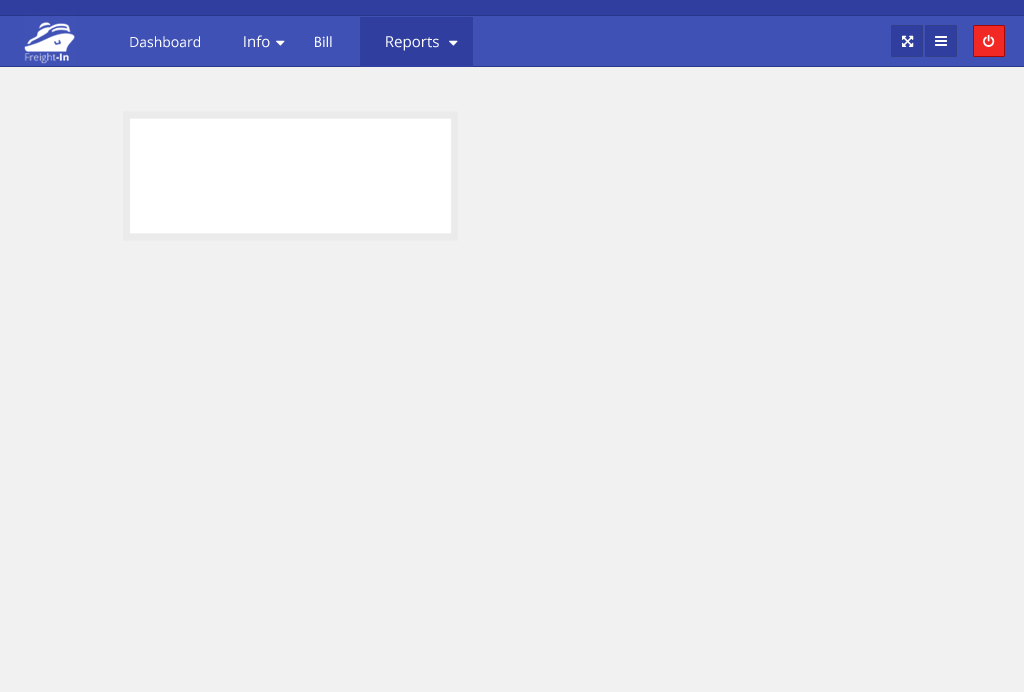
<style>
.page{position:relative;width:1024px;height:692px;background:#f1f1f1}
.page>*{position:absolute;margin:0}
.t1{font:14px "OpenSans";color:#ffffff}
.t2{font:15px "OpenSans";color:#ffffff}
.t3{font:15px "MyriadPro-Regular";color:#ffffff}
</style>
<div class="page">
<p class="t1" style="left:130px;top:36px;width:70px;height:12px">Dashboard</p>
<p class="t2" style="left:244px;top:35px;width:26px;height:13px">Info</p>
<p class="t3" style="left:315px;top:36px;width:17px;height:11px">Bill</p>
<p class="t2" style="left:386px;top:36px;width:53px;height:15px">Reports</p>
</div>
